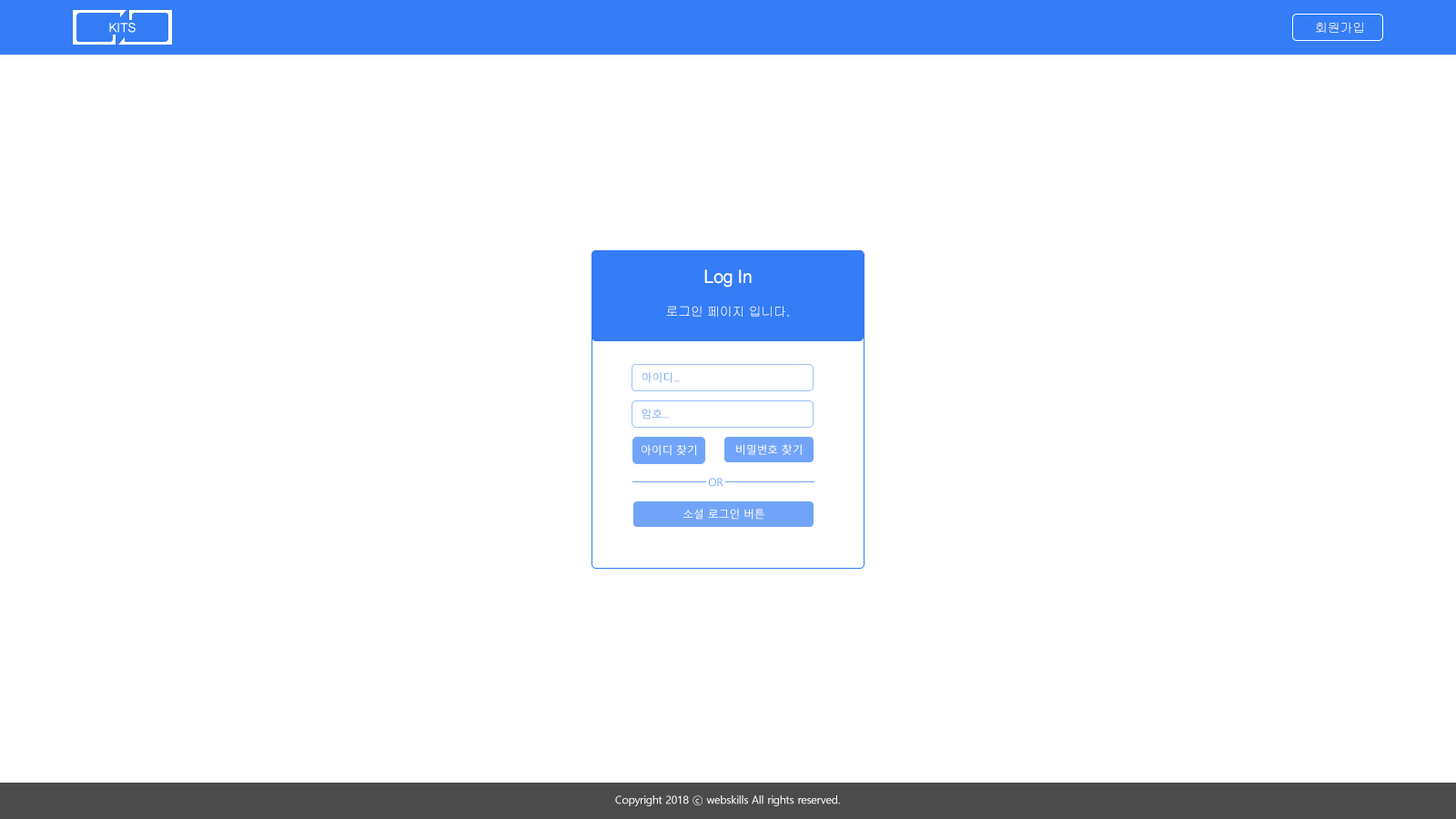
<style>
.page{position:relative;width:1456px;height:819px;background:#ffffff}
.page>*{position:absolute;margin:0}
.t1{font:12.7px "Gulim";letter-spacing:-0.02em;color:#ffffff}
.t2{font:18.2px "ArialMT";letter-spacing:-0.02em;color:#ffffff}
.t3{font:10.9px "MalgunGothic";letter-spacing:-0.02em;color:#71a4f9}
.t4{font:10.9px "MalgunGothic";letter-spacing:-0.02em;color:#ffffff}
</style>
<div class="page">
<p class="t1" style="left:1316px;top:22px;width:47px;height:12px">회원가입</p>
<p class="t2" style="left:704px;top:269px;width:48px;height:19px">Log In</p>
<p class="t1" style="left:666px;top:306px;width:123px;height:12px">로그인 페이지 입니다.</p>
<p class="t3" style="left:642px;top:372px;width:38px;height:11px">아이디...</p>
<p class="t3" style="left:642px;top:409px;width:27px;height:11px">암호...</p>
<p class="t4" style="left:642px;top:445px;width:54px;height:11px">아이디 찾기</p>
<p class="t4" style="left:736px;top:444px;width:66px;height:11px">비밀번호 찾기</p>
<p class="t4" style="left:683px;top:509px;width:81px;height:11px">소셜 로그인 버튼</p>
<p class="t4" style="left:615px;top:795px;width:225px;height:11px">Copyright 2018 ⓒ webskills All rights reserved.</p>
</div>
